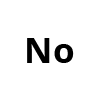
<style>
.page{position:relative;width:100px;height:100px;background:#ffffff}
.page>*{position:absolute;margin:0}
.t1{font:35px "OpenSans-Bold";color:#000000}
</style>
<div class="page">
<p class="t1" style="left:27px;top:38px;width:47px;height:25px">No</p>
</div>
